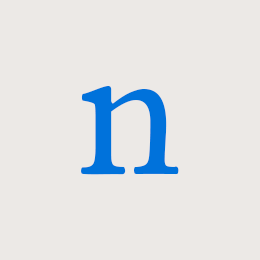
<style>
.page{position:relative;width:260px;height:260px;background:#ece9e6}
.page>*{position:absolute;margin:0}
.t1{font:200px "ETBembo-RomanLF";color:#0072db}
</style>
<div class="page">
<p class="t1" style="left:81px;top:86px;width:98px;height:89px">n</p>
</div>
